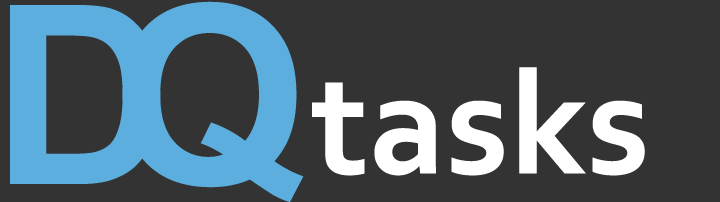
<style>
.page{position:relative;width:720px;height:202px;background:#333333}
.page>*{position:absolute;margin:0}
.t1{font:250px "Arial-BoldMT";color:#5baede}
.t2{font:150px "Corbel-Bold";color:#ffffff}
</style>
<div class="page">
<p class="t1" style="left:10px;top:5px;width:151px;height:179px">D</p>
<p class="t1" style="left:122px;top:1px;width:182px;height:201px">Q</p>
<p class="t2" style="left:312px;top:67px;width:333px;height:109px">tasks</p>
</div>
